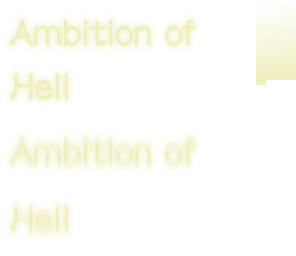
<style>
.page{position:relative;width:296px;height:256px;background:#ffffff}
.page>*{position:absolute;margin:0}
.t1{font:48.4px/54px "DFLeiShoStd-W5";letter-spacing:-0.025em;color:#efeebe;scale:0.82 1}
</style>
<div class="page">
<p class="t1" style="left:9px;top:19px;width:187px;height:81px">Ambition of<br>Hell</p>
</div>
